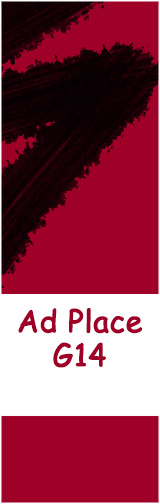
<style>
.page{position:relative;width:160px;height:504px;background:#9f0027}
.page>*{position:absolute;margin:0}
.t1{font:30px "ComicSansMS";color:#9f0027;font-weight:bold}
</style>
<div class="page">
<p class="t1" style="left:18px;top:308px;width:125px;height:26px">Ad Place</p>
<p class="t1" style="left:53px;top:342px;width:54px;height:26px">G14</p>
</div>
